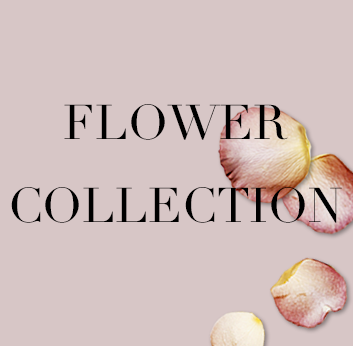
<style>
.page{position:relative;width:353px;height:346px;background:#d7c6c6}
.page>*{position:absolute;margin:0}
.t1{font:48px "Didot";color:#000000}
</style>
<div class="page">
<p class="t1" style="left:64px;top:104px;width:224px;height:36px">FLOWER</p>
<p class="t1" style="left:11px;top:187px;width:331px;height:36px">COLLECTION</p>
</div>
